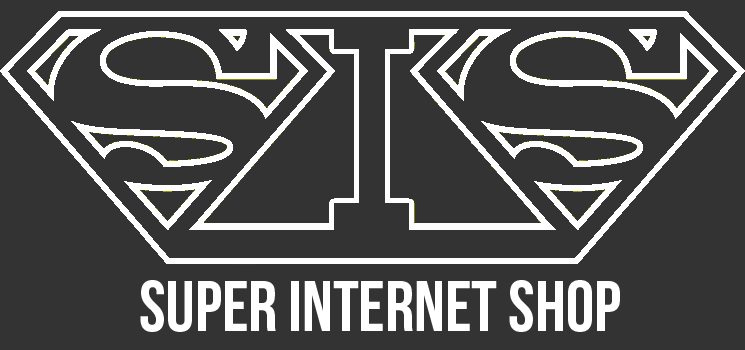
<style>
.page{position:relative;width:745px;height:350px;background:#333333}
.page>*{position:absolute;margin:0}
.t1{font:72px "BebasNeue";color:#ffffff}
</style>
<div class="page">
<p class="t1" style="left:140px;top:280px;width:480px;height:52px">SUPER INTERNET SHOP</p>
</div>
